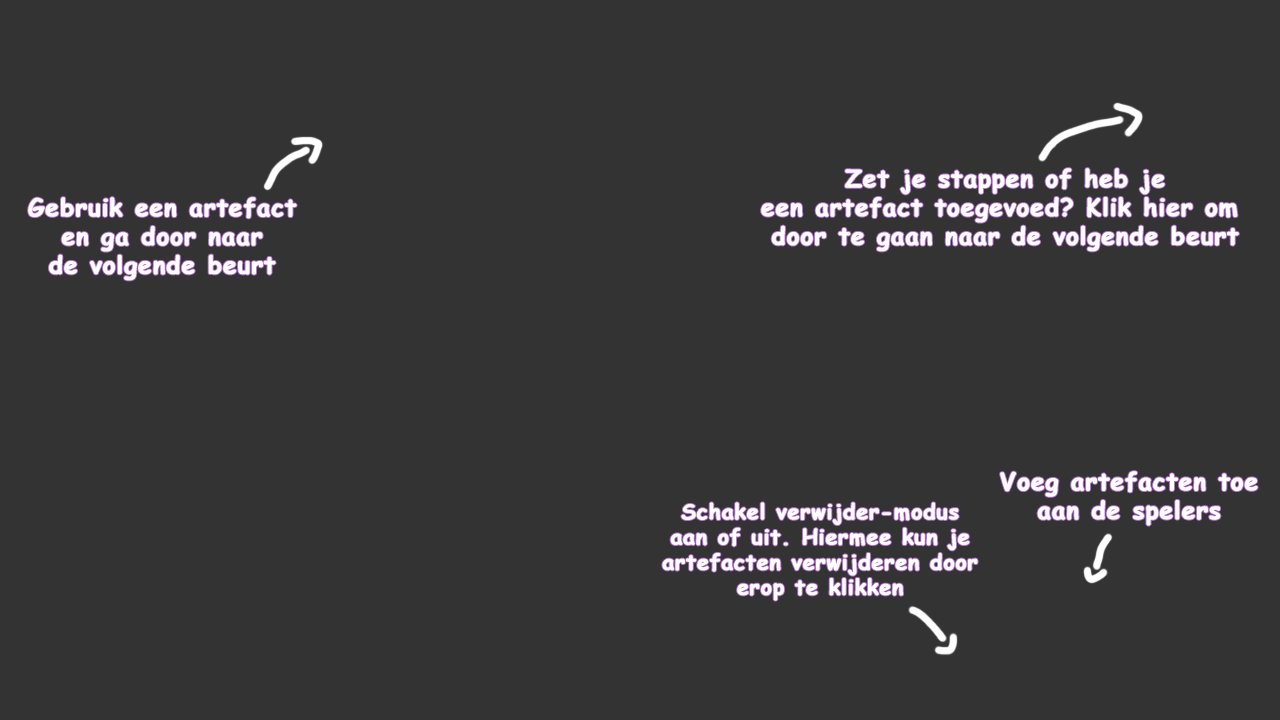
<style>
.page{position:relative;width:1280px;height:720px;background:#333333}
.page>*{position:absolute;margin:0}
.t1{font:24px "ComicSansMS-Bold";letter-spacing:0.02em;color:#ffffff;font-weight:bold}
.t2{font:21px "ComicSansMS-Bold";letter-spacing:0.02em;color:#ffffff;font-weight:bold}
</style>
<div class="page">
<p class="t1" style="left:761px;top:168px;width:478px;height:84px;text-align:center">Zet je stappen of heb je<br>een artefact toegevoed? Klik hier om <br>door te gaan naar de volgende beurt</p>
<p class="t1" style="left:28px;top:197px;width:269px;height:84px;text-align:center">Gebruik een artefact<br>en ga door naar<br>de volgende beurt</p>
<p class="t1" style="left:1000px;top:471px;width:258px;height:55px;text-align:center">Voeg artefacten toe<br>aan de spelers</p>
<p class="t2" style="left:662px;top:502px;width:316px;height:99px;text-align:center">Schakel verwijder-modus<br>aan of uit. Hiermee kun je<br>artefacten verwijderen door<br>erop te klikken</p>
</div>
